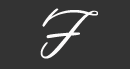
<style>
.page{position:relative;width:130px;height:69px;background:#333333}
.page>*{position:absolute;margin:0}
.t1{font:57.4px "VladimirScript";color:#fcfbfb;text-transform:uppercase}
</style>
<div class="page">
<p class="t1" style="left:40px;top:8px;width:58px;height:51px">F</p>
</div>
